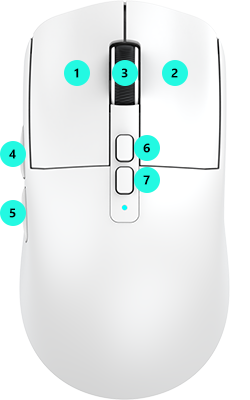
<style>
.page{position:relative;width:250px;height:400px;background:#ffffff}
.page>*{position:absolute;margin:0}
.t1{font:12.5px "SegoeUI-Bold";color:#000000}
</style>
<div class="page">
<p class="t1" style="left:74px;top:68px;width:5px;height:10px">1</p>
<p class="t1" style="left:121px;top:68px;width:7px;height:10px">3</p>
<p class="t1" style="left:171px;top:68px;width:7px;height:10px">2</p>
<p class="t1" style="left:9px;top:149px;width:7px;height:10px">4</p>
<p class="t1" style="left:143px;top:143px;width:7px;height:10px">6</p>
<p class="t1" style="left:143px;top:175px;width:7px;height:10px">7</p>
<p class="t1" style="left:9px;top:208px;width:7px;height:10px">5</p>
</div>
